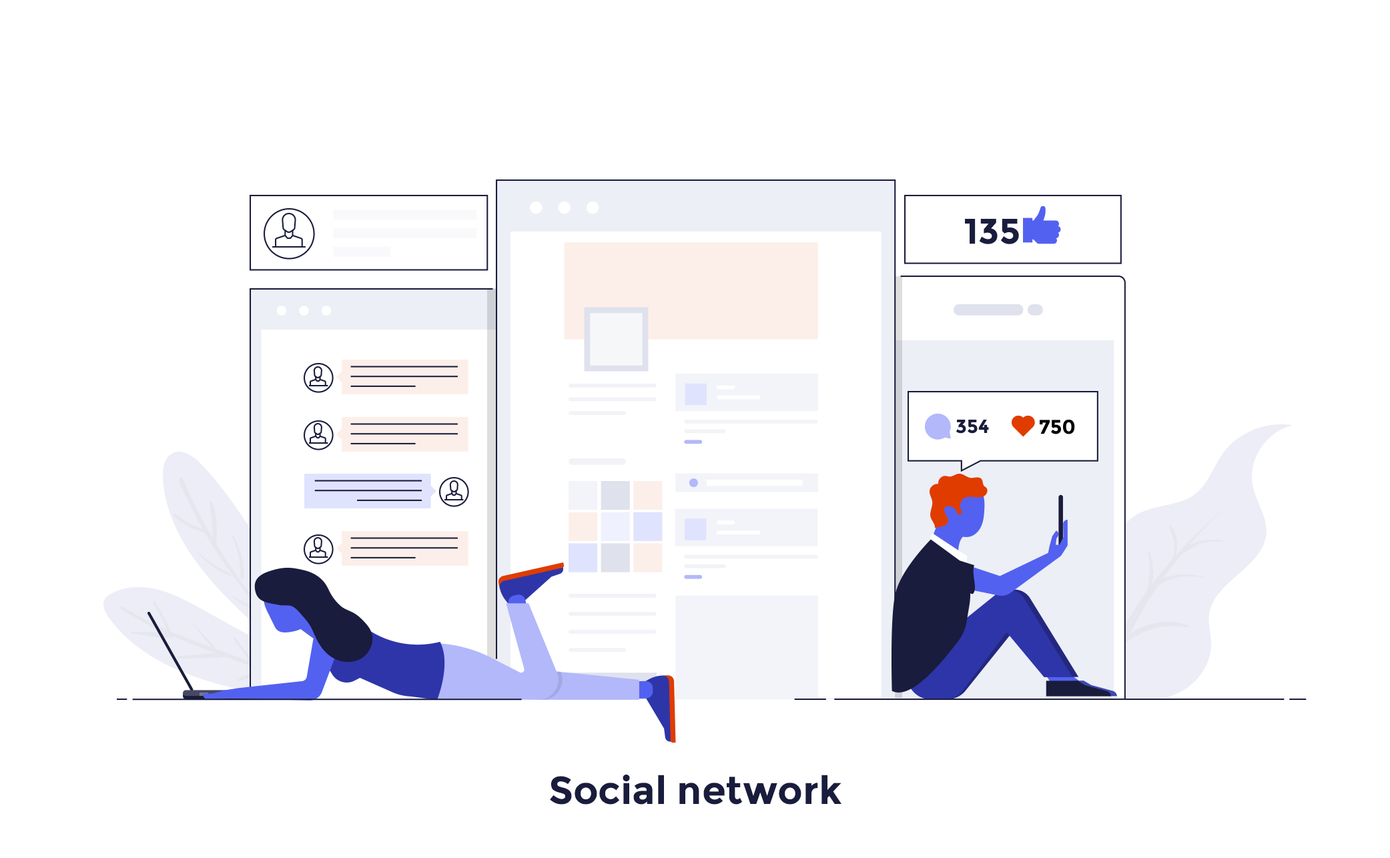
<style>
.page{position:relative;width:1390px;height:858px;background:#ffffff}
.page>*{position:absolute;margin:0}
.t1{font:38.9px "Montserrat-Bold";color:#191c3c}
</style>
<div class="page">
<p class="t1" style="left:550px;top:775px;width:291px;height:30px">Social network</p>
</div>
